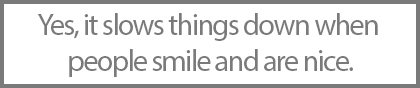
<style>
.page{position:relative;width:420px;height:88px;background:#ffffff}
.page>*{position:absolute;margin:0}
.t1{font:30px/36px "MyriadPro-Regular";letter-spacing:-0.05em;color:#7a7a7a}
</style>
<div class="page">
<p class="t1" style="left:38px;top:13px;width:340px;height:64px;text-align:center">Yes, it slows things down when <br>people smile and are nice.</p>
</div>
